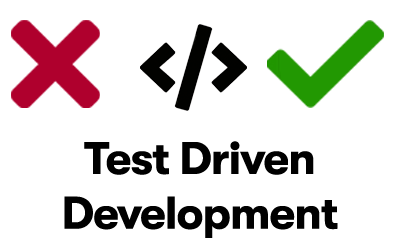
<style>
.page{position:relative;width:400px;height:250px;background:#ffffff}
.page>*{position:absolute;margin:0}
.t1{font:45.6px "GTWalsheim-Bold";letter-spacing:-0.02em;color:#000000}
</style>
<div class="page">
<p class="t1" style="left:64px;top:141px;width:274px;height:97px;text-align:center">Test Driven<br>Development</p>
</div>
